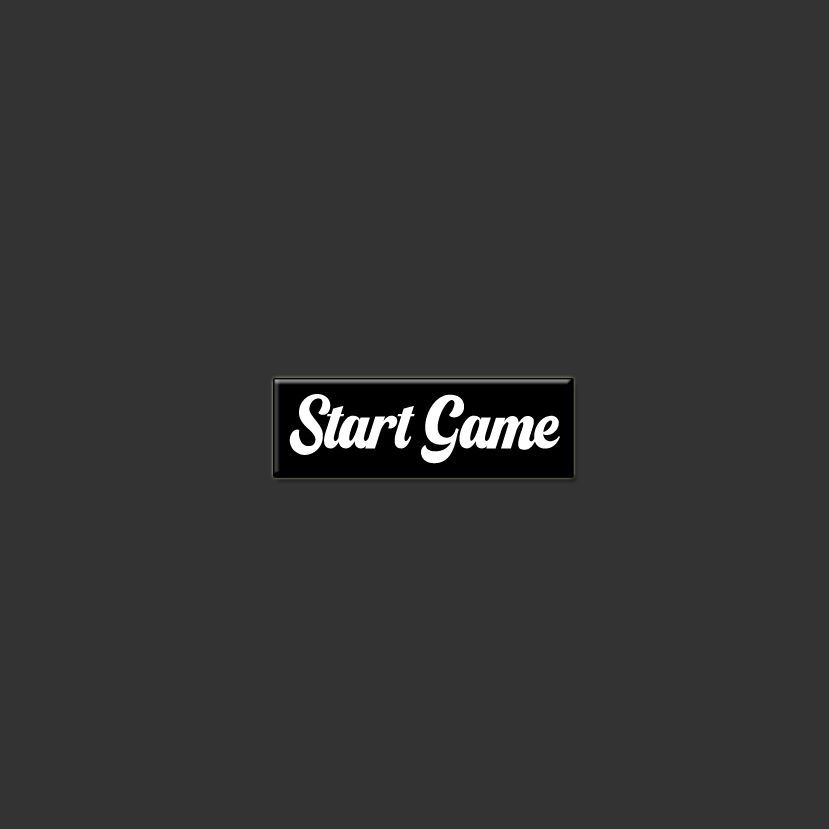
<style>
.page{position:relative;width:829px;height:829px;background:#333333}
.page>*{position:absolute;margin:0}
.t1{font:72px "Franky";color:#ffffff}
</style>
<div class="page">
<p class="t1" style="left:289px;top:394px;width:271px;height:70px">Start Game</p>
</div>
